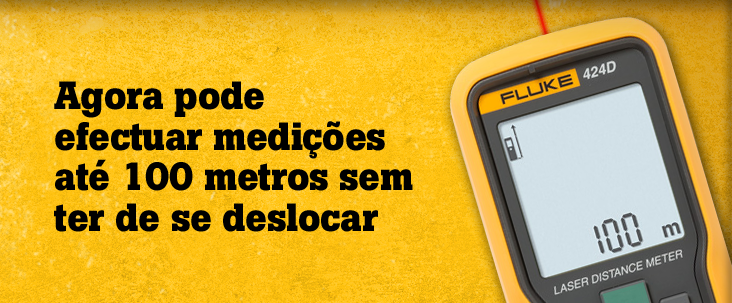
<style>
.page{position:relative;width:732px;height:303px}
.page>*{position:absolute;margin:0}
.t1{font:39px/30px "BotonPro-Bold";letter-spacing:-0.01em;color:#000000}
</style>
<div class="page">
<p class="t1" style="left:54px;top:81px;width:359px;height:151px">Agora pode <br>efectuar medições <br>até 100 metros sem <br>ter de se deslocar</p>
</div>
